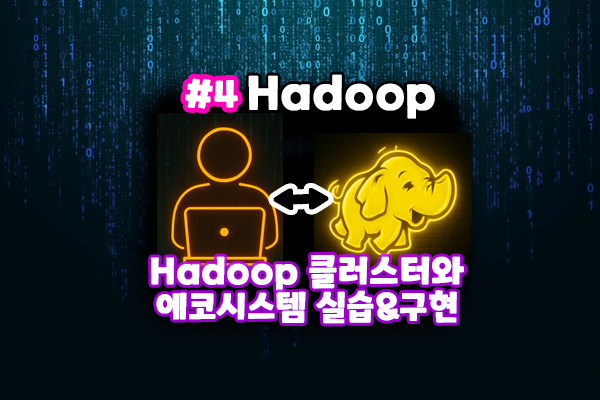
<style>
.page{position:relative;width:600px;height:400px;background:#010c11}
.page>*{position:absolute;margin:0}
.t1{font:36px "ONEMobilePOPRegular";color:#ffffff;font-weight:bold}
.t2{font:45.1px "ONEMobilePOPRegular";color:#ffffff;font-weight:bold}
.t3{font:57.5px "ONEMobilePOPRegular";color:#000000;font-weight:bold}
.t4{font:35.5px "ONEMobilePOPRegular";color:#ffffff;font-weight:bold}
.t5{font:34px "ONEMobilePOPRegular";color:#ffffff;font-weight:bold}
</style>
<div class="page">
<p class="t1" style="left:185px;top:78px;width:53px;height:31px">#4</p>
<p class="t2" style="left:248px;top:74px;width:187px;height:45px">Hadoop</p>
<p class="t3" style="left:273px;top:188px;width:56px;height:22px">↔</p>
<p class="t4" style="left:151px;top:255px;width:313px;height:37px">Hadoop 클러스터와</p>
<p class="t5" style="left:156px;top:290px;width:301px;height:34px">에코시스템 실습&amp;구현</p>
</div>
